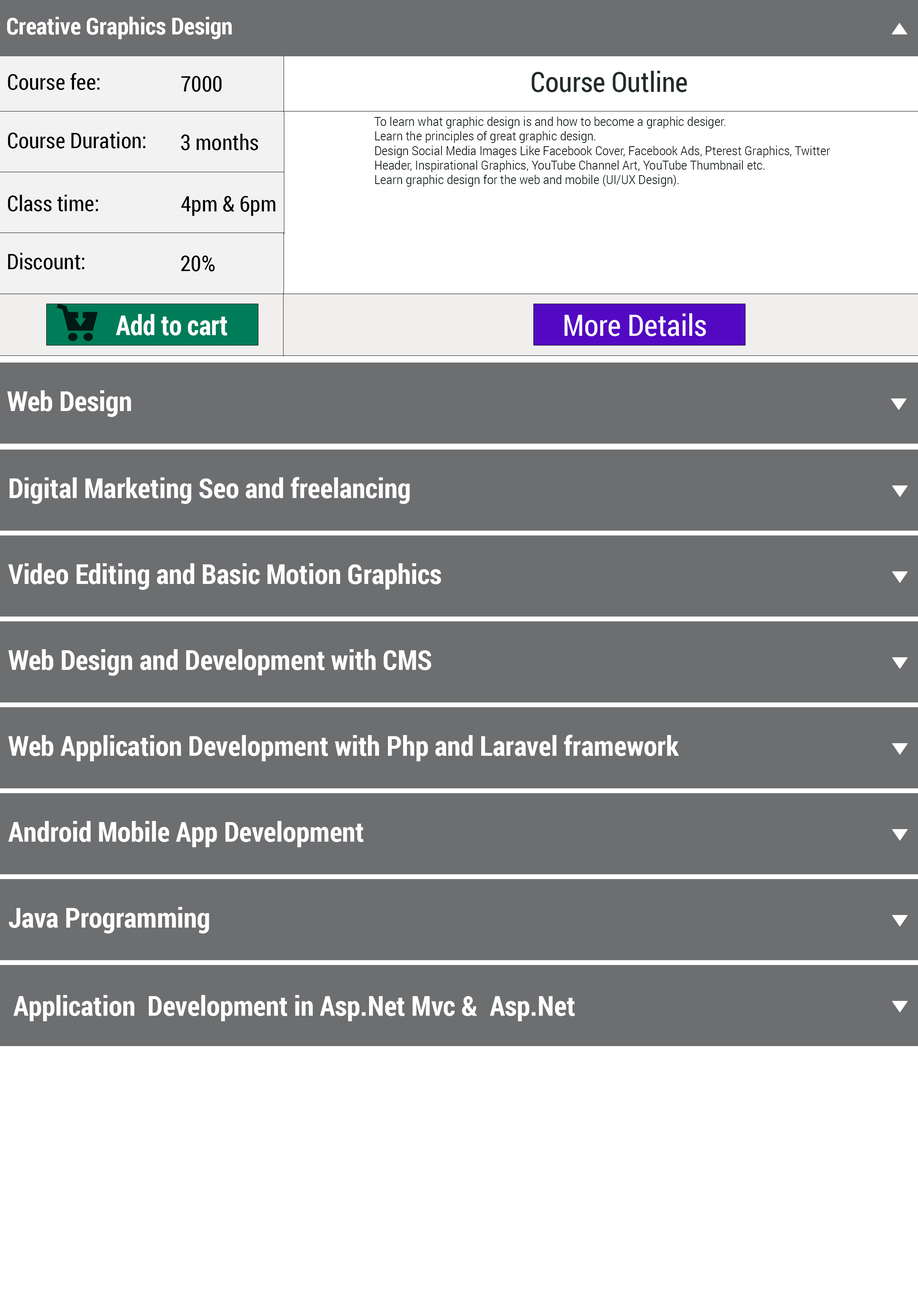
<style>
.page{position:relative;width:918px;height:1299px;background:#6d6e70}
.page>*{position:absolute;margin:0}
.t1{font:23.2px "RobotoCondensed-Bold";color:#ffffff}
.t2{font:21.6px "RobotoCondensed-Regular";color:#000000}
.t3{font:27.8px "RobotoCondensed-Regular";color:#232b2b}
.t4{font:12.1px "RobotoCondensed-Light";color:#000b0a;scale:1.12 1}
.t5{font:27.6px "RobotoCondensed-Bold";color:#ffffff;scale:0.94 1}
.t6{font:29.7px "RobotoCondensed-Regular";color:#f8f7fc}
.t7{font:27.4px "RobotoCondensed-Bold";color:#ffffff}
</style>
<div class="page">
<p class="t1" style="left:7px;top:17px;width:225px;height:22px">Creative Graphics Design</p>
<p class="t2" style="left:8px;top:73px;width:92px;height:17px">Course fee:</p>
<p class="t2" style="left:181px;top:76px;width:41px;height:16px">7000</p>
<p class="t3" style="left:532px;top:71px;width:155px;height:21px">Course Outline</p>
<p class="t4" style="left:374px;top:116px;width:456px;height:71px">To learn what graphic design is and how to become a graphic desiger.<br>Learn the principles of great graphic design.<br>Design Social Media Images Like Facebook Cover, Facebook Ads, Pterest Graphics, Twitter Header, Inspirational Graphics, YouTube Channel Art, YouTube Thumbnail etc.<br>Learn graphic design for the web and mobile (UI/UX Design).</p>
<p class="t2" style="left:8px;top:131px;width:137px;height:17px">Course Duration:</p>
<p class="t2" style="left:181px;top:134px;width:77px;height:16px">3 months</p>
<p class="t2" style="left:8px;top:194px;width:90px;height:17px">Class time:</p>
<p class="t2" style="left:181px;top:196px;width:94px;height:20px">4pm &amp; 6pm</p>
<p class="t2" style="left:8px;top:252px;width:76px;height:18px">Discount:</p>
<p class="t2" style="left:181px;top:255px;width:34px;height:16px">20%</p>
<p class="t5" style="left:116px;top:314px;width:111px;height:21px">Add to cart</p>
<p class="t6" style="left:565px;top:313px;width:141px;height:23px">More Details</p>
<p class="t7" style="left:7px;top:390px;width:124px;height:27px">Web Design</p>
<p class="t7" style="left:10px;top:477px;width:400px;height:27px">Digital Marketing Seo and freelancing</p>
<p class="t7" style="left:8px;top:563px;width:433px;height:27px">Video Editing and Basic Motion Graphics</p>
<p class="t7" style="left:8px;top:649px;width:423px;height:27px">Web Design and Development with CMS</p>
<p class="t7" style="left:8px;top:735px;width:671px;height:26px">Web Application Development with Php and Laravel framework</p>
<p class="t7" style="left:8px;top:821px;width:356px;height:26px">Android Mobile App Development</p>
<p class="t7" style="left:9px;top:907px;width:200px;height:26px">Java Programming</p>
<p class="t7" style="left:13px;top:995px;width:562px;height:26px">Application  Development in Asp.Net Mvc &amp;  Asp.Net</p>
</div>
